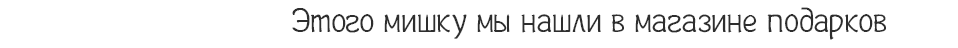
<style>
.page{position:relative;width:958px;height:48px;background:#ffffff}
.page>*{position:absolute;margin:0}
.t1{font:35px "Plainot";color:#2e2e2e}
</style>
<div class="page">
<p class="t1" style="left:292px;top:7px;width:594px;height:33px">Этого мишку мы нашли в магазине подарков</p>
</div>
